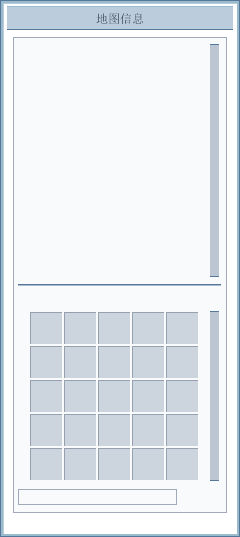
<style>
.page{position:relative;width:240px;height:537px;background:#f8fafc}
.page>*{position:absolute;margin:0}
.t1{font:12px "SimSun"}
</style>
<div class="page">
<p class="t1" style="left:96px;top:13px;width:47px;height:12px">地图信息</p>
</div>
